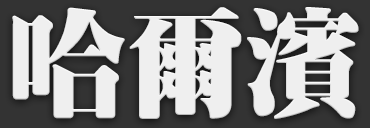
<style>
.page{position:relative;width:370px;height:128px;background:#efefef}
.page>*{position:absolute;margin:0}
.t1{font:117px "¾­µä·±³¬ËÎ Regular";color:#ffffff}
</style>
<div class="page">
<p class="t1" style="left:12px;top:7px;width:347px;height:112px">哈尔滨</p>
</div>
